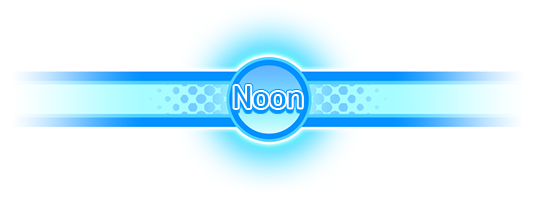
<style>
.page{position:relative;width:536px;height:200px;background:#ffffff}
.page>*{position:absolute;margin:0}
.t1{font:30px "JK-Gothic-M";color:#0394ff}
</style>
<div class="page">
<p class="t1" style="left:234px;top:86px;width:68px;height:22px">Noon</p>
</div>
